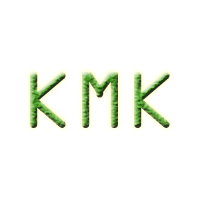
<style>
.page{position:relative;width:200px;height:200px;background:#ffffff}
.page>*{position:absolute;margin:0}
.t1{font:72px "OCRAStd"}
</style>
<div class="page">
<p class="t1" style="left:30px;top:72px;width:140px;height:56px">KMK</p>
</div>
